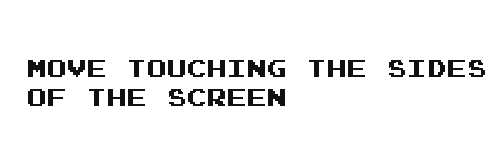
<style>
.page{position:relative;width:500px;height:150px;background:#ffffff}
.page>*{position:absolute;margin:0}
.t1{font:24px "JoystixMonospace-Regular";color:#111111}
</style>
<div class="page">
<p class="t1" style="left:28px;top:60px;width:457px;height:46px">Move touching the sides<br>of the screen</p>
</div>
